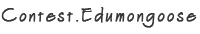
<style>
.page{position:relative;width:200px;height:34px;background:#ffffff}
.page>*{position:absolute;margin:0}
.t1{font:19.7px "Architext";letter-spacing:0.16em;color:#393939;font-weight:bold}
</style>
<div class="page">
<p class="t1" style="left:1px;top:7px;width:196px;height:21px">Contest.Edumongoose</p>
</div>
